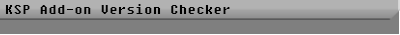
<style>
.page{position:relative;width:400px;height:35px;background:#7f7f7f}
.page>*{position:absolute;margin:0}
.t1{font:12px "Fixedsys";letter-spacing:0.1em;color:#010101}
</style>
<div class="page">
<p class="t1" style="left:5px;top:4px;width:225px;height:10px">KSP Add-on Version Checker</p>
</div>
